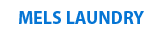
<style>
.page{position:relative;width:159px;height:35px;background:#ffffff}
.page>*{position:absolute;margin:0}
.t1{font:18px "MyriadPro-Bold";color:#0575d4}
</style>
<div class="page">
<p class="t1" style="left:19px;top:11px;width:125px;height:13px">MELS LAUNDRY</p>
</div>
